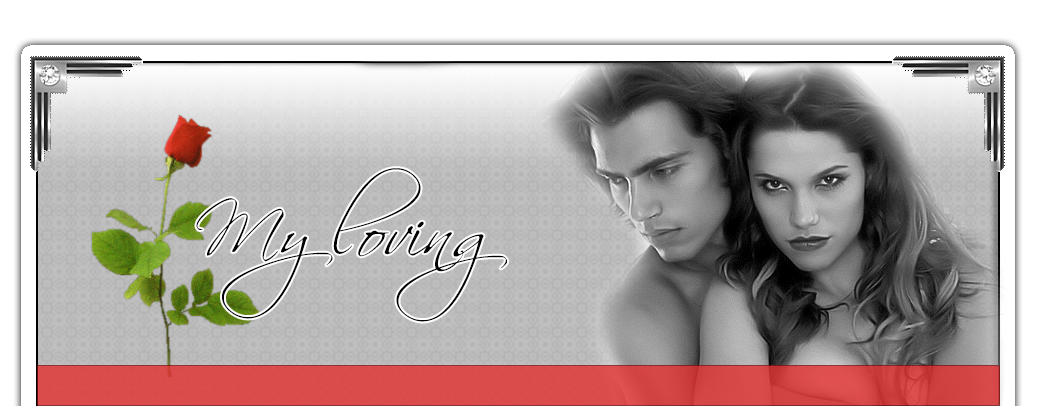
<style>
.page{position:relative;width:1046px;height:406px}
.page>*{position:absolute;margin:0}
.t1{font:72px/234.5px "Scriptina";color:#000000}
</style>
<div class="page">
<p class="t1" style="left:196px;top:168px;width:311px;height:154px">My loving</p>
</div>
